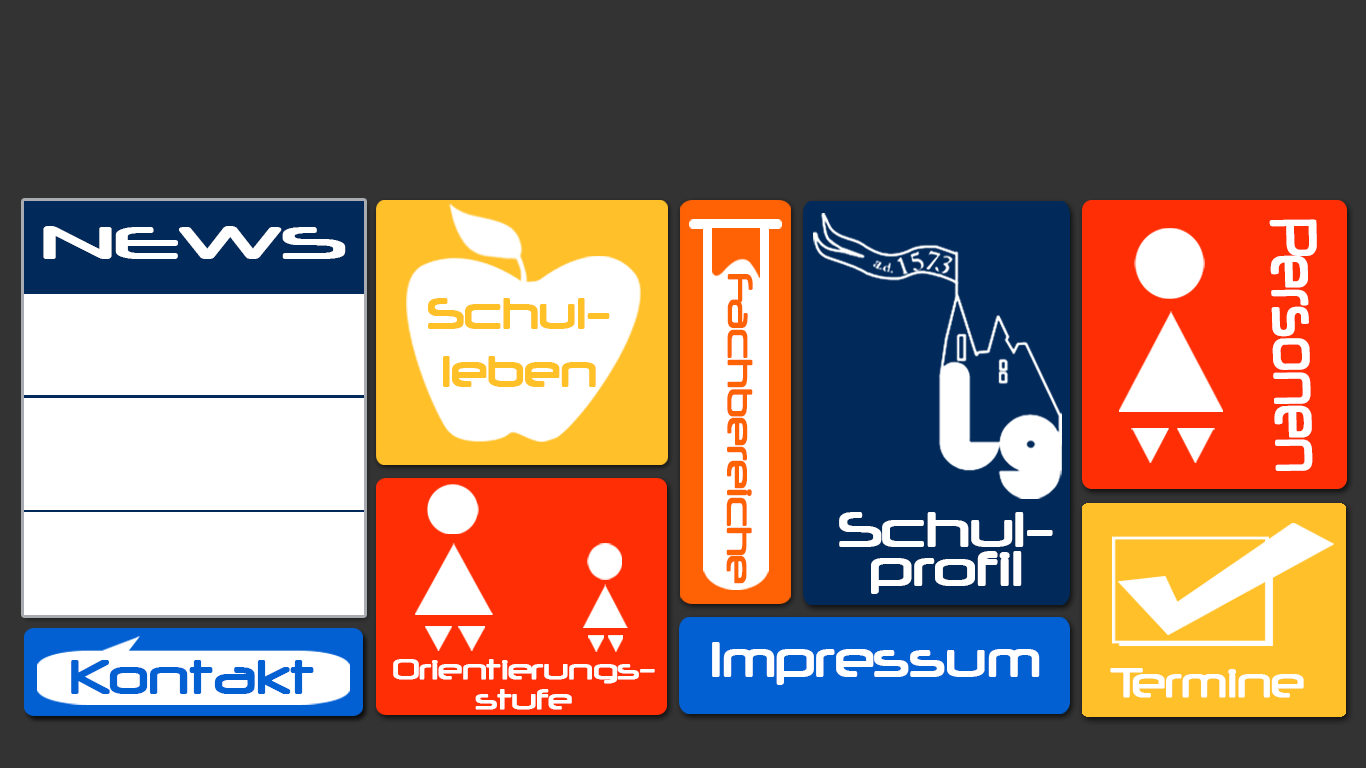
<style>
.page{position:relative;width:1366px;height:768px;background:#333333}
.page>*{position:absolute;margin:0}
.t1{font:76.4px "Neuropol";letter-spacing:-0.01em;color:#ffffff;font-weight:bold;scale:0.62 1}
.t2{font:52.7px "Neuropol";letter-spacing:-0.01em;color:#ffffff;font-weight:bold;scale:1.68 1}
.t3{font:41.2px "Neuropol";letter-spacing:-0.01em;color:#ff6204;font-weight:bold}
.t4{font:51.5px/14.6px "Neuropol";letter-spacing:-0.01em;color:#ffc028;font-weight:bold}
.t5{font:57.1px/13px "Neuropol";letter-spacing:-0.01em;color:#ffffff;font-weight:bold;scale:1.05 1}
.t6{font:57.5px "Neuropol";letter-spacing:-0.01em;color:#ffffff;font-weight:bold;scale:0.96 1}
.t7{font:56.2px "Neuropol";letter-spacing:-0.01em;color:#0260d2;font-weight:bold}
.t8{font:33.4px/15.2px "Neuropol";letter-spacing:-0.01em;color:#ffffff;font-weight:bold}
.t9{font:49.1px "Neuropol";letter-spacing:-0.01em;color:#ffffff;font-weight:bold;scale:0.96 1}
</style>
<div class="page">
<p class="t1" style="left:1269px;top:219px;width:48px;height:252px;rotate:89deg">Personen</p>
<p class="t2" style="left:43px;top:226px;width:303px;height:33px">NEWS</p>
<p class="t3" style="left:726px;top:274px;width:27px;height:310px;rotate:90deg">Fachbereiche</p>
<p class="t4" style="left:428px;top:298px;width:182px;height:89px;text-align:center">Schul-<br><br><br><br>leben</p>
<p class="t5" style="left:839px;top:512px;width:214px;height:82px;text-align:center">Schul-<br><br><br>profil</p>
<p class="t6" style="left:712px;top:642px;width:328px;height:43px">Impressum</p>
<p class="t7" style="left:71px;top:660px;width:243px;height:34px">Kontakt</p>
<p class="t8" style="left:393px;top:659px;width:262px;height:51px;text-align:center">Orientierungs-<br><br>stufe</p>
<p class="t9" style="left:1110px;top:668px;width:194px;height:30px">Termine</p>
</div>
